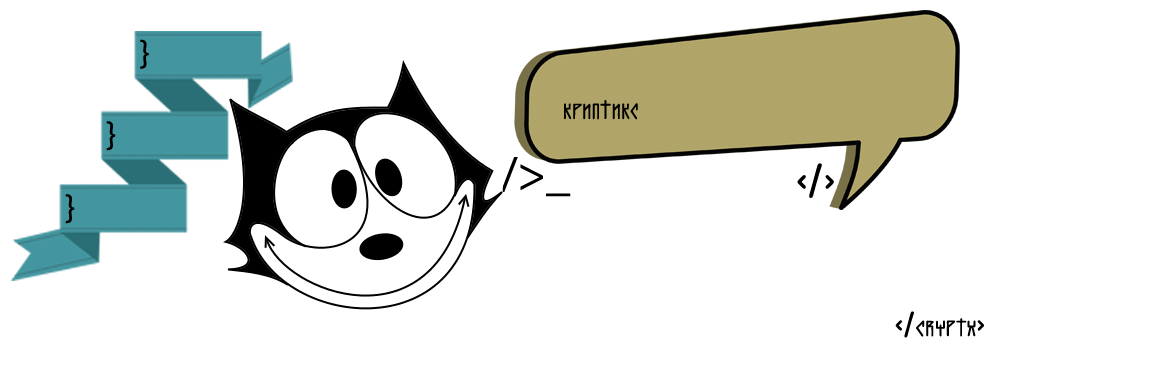
<style>
.page{position:relative;width:1163px;height:365px;background:#ffffff}
.page>*{position:absolute;margin:0}
.t1{font:36px "MyriadPro-Regular";color:#000000}
.t2{font:24px "Galaktika";color:#000000}
.t3{font:48px "MyriadPro-Regular";color:#000000}
.t4{font:48px "Galaktika";color:#000000}
.t5{font:36px "Galaktika";color:#000000}
</style>
<div class="page">
<p class="t1" style="left:140px;top:39px;width:9px;height:30px">}</p>
<p class="t2" style="left:564px;top:100px;width:74px;height:20px">криптикс</p>
<p class="t1" style="left:106px;top:121px;width:10px;height:30px">}</p>
<p class="t3" style="left:500px;top:157px;width:71px;height:40px">/&gt;_</p>
<p class="t4" style="left:797px;top:163px;width:37px;height:35px"><span class="t3">                     </span>&lt;/&gt;</p>
<p class="t1" style="left:65px;top:194px;width:10px;height:30px">}</p>
<p class="t2" style="left:895px;top:311px;width:89px;height:27px"><span class="t5"> &lt;/</span>cryptx<span class="t5">&gt;</span></p>
</div>
